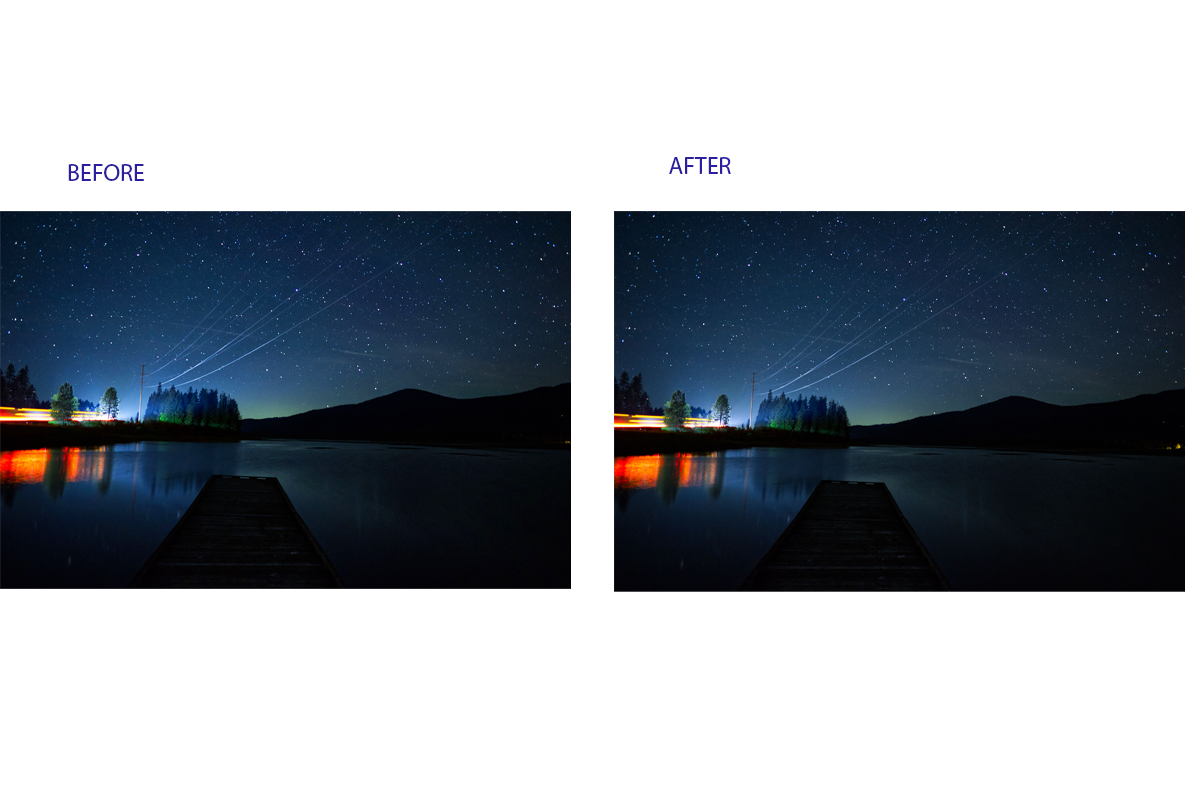
<style>
.page{position:relative;width:1200px;height:800px;background:#ffffff}
.page>*{position:absolute;margin:0}
.t1{font:24px "MyriadPro-Regular";color:#2b1fa0}
</style>
<div class="page">
<p class="t1" style="left:669px;top:157px;width:62px;height:17px">AFTER</p>
<p class="t1" style="left:68px;top:164px;width:76px;height:17px">BEFORE</p>
</div>
